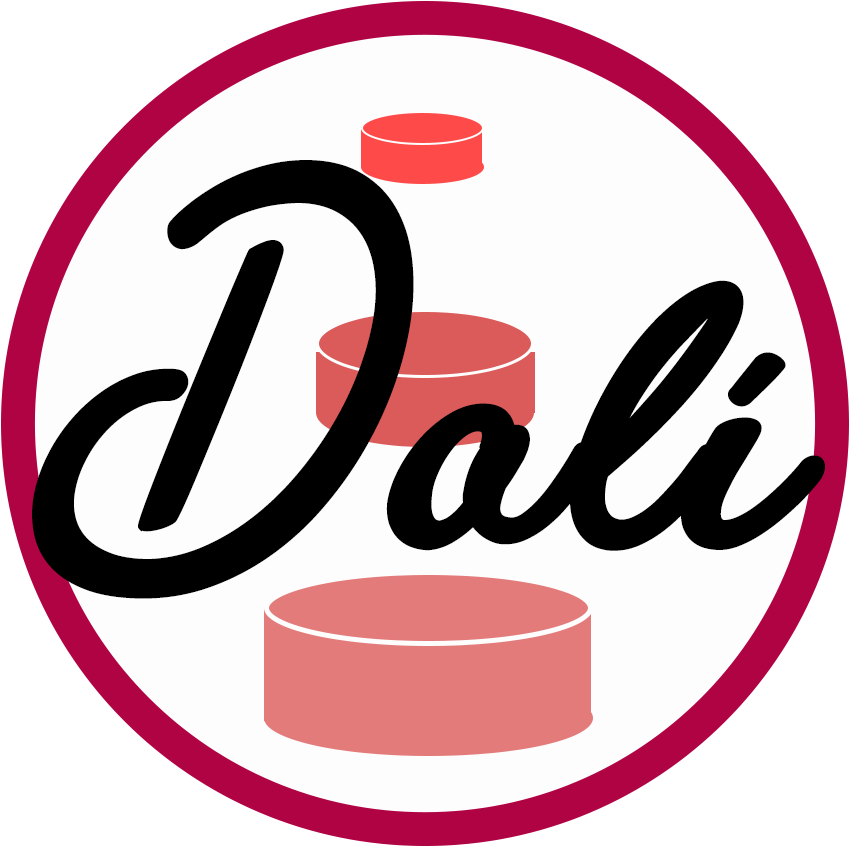
<style>
.page{position:relative;width:850px;height:850px;background:#fdfdfd}
.page>*{position:absolute;margin:0}
.t1{font:250px "AmbarPearlPersonalUse";color:#000000;font-weight:bold}
</style>
<div class="page">
<p class="t1" style="left:32px;top:160px;width:794px;height:439px;text-align:center">Dalí</p>
</div>
